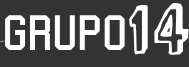
<style>
.page{position:relative;width:189px;height:67px;background:#333333}
.page>*{position:absolute;margin:0}
.t1{font:81px "ComicZineOT";color:#ffffff}
.t2{font:51px "College";color:#ffffff}
</style>
<div class="page">
<p class="t1" style="left:129px;top:3px;width:60px;height:52px">14</p>
<p class="t2" style="left:5px;top:15px;width:120px;height:35px">Grupo</p>
</div>
